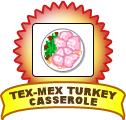
<style>
.page{position:relative;width:126px;height:120px;background:#ffffff}
.page>*{position:absolute;margin:0}
.t1{font:9.4px/9.4px "Arial-Black";letter-spacing:0.045em;color:#5b3714;text-transform:uppercase}
</style>
<div class="page">
<p class="t1" style="left:9px;top:86px;width:108px;height:20px;text-align:center">tex-mex turkey<br>casserole</p>
</div>
